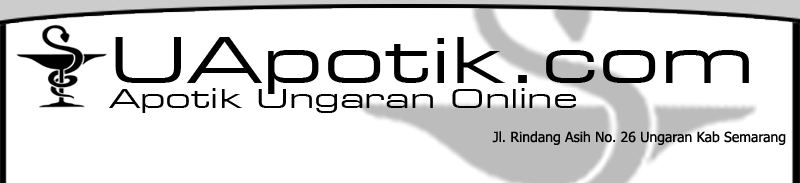
<style>
.page{position:relative;width:800px;height:183px;background:#ffffff}
.page>*{position:absolute;margin:0}
.t1{font:63.1px "Square721BT-RomanExtended";color:#000000;scale:1.23 1}
.t2{font:26.3px "Square721BT-RomanExtended";color:#000000;scale:1.23 1}
.t3{font:14px "Tahoma";color:#000000}
</style>
<div class="page">
<p class="t1" style="left:115px;top:37px;width:634px;height:57px">UApotik.com</p>
<p class="t2" style="left:109px;top:88px;width:467px;height:25px">Apotik Ungaran Online</p>
<p class="t3" style="left:492px;top:131px;width:294px;height:14px">Jl. Rindang Asih No. 26 Ungaran Kab Semarang</p>
</div>
